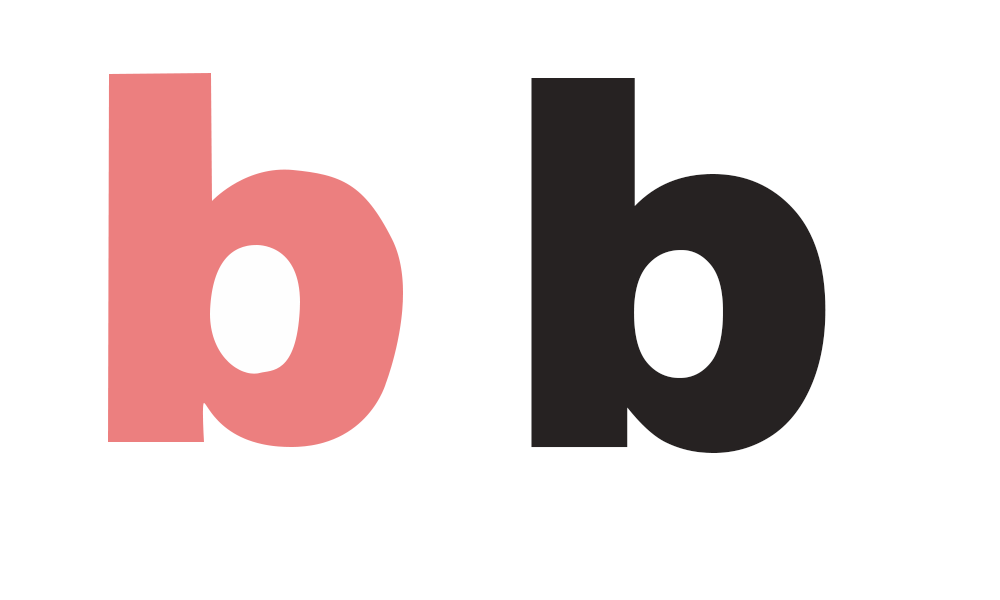
<style>
.page{position:relative;width:1000px;height:600px;background:#ffffff}
.page>*{position:absolute;margin:0}
.t1{font:515.1px "Arial-Black";color:#262222}
</style>
<div class="page">
<p class="t1" style="left:531px;top:78px;width:295px;height:375px">b</p>
</div>
